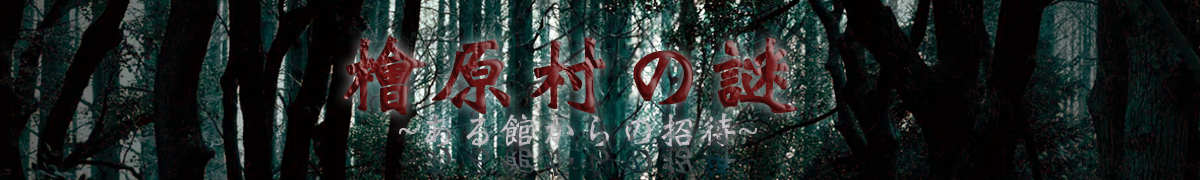
<style>
.page{position:relative;width:1200px;height:180px}
.page>*{position:absolute;margin:0}
.t1{font:90px "WeibeiTC-Bold";font-weight:bold}
.t2{font:40px "WeibeiTC-Bold";color:#b7b3b7}
.t3{font:40px "KozGoPr6N-Regular";color:#b7b3b7}
</style>
<div class="page">
<p class="t1" style="left:343px;top:36px;width:455px;height:79px">檜原村の謎</p>
<p class="t2" style="left:399px;top:112px;width:358px;height:37px"><span class="t3">˜</span>ある館からの招待<span class="t3">˜</span></p>
</div>
